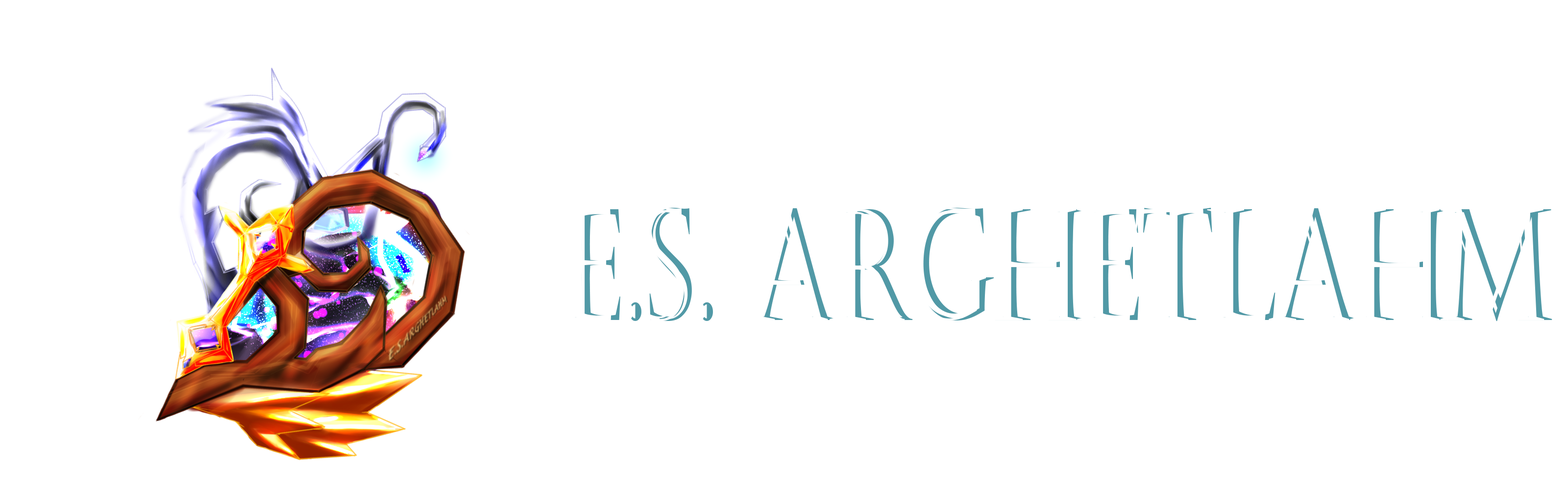
<style>
.page{position:relative;width:1568px;height:490px;background:#ffffff}
.page>*{position:absolute;margin:0}
.t1{font:155px "Castellar";color:#5199a6;scale:0.64 1}
</style>
<div class="page">
<p class="t1" style="left:566px;top:208px;width:986px;height:113px">E.S. ARGHETLAHM</p>
</div>
